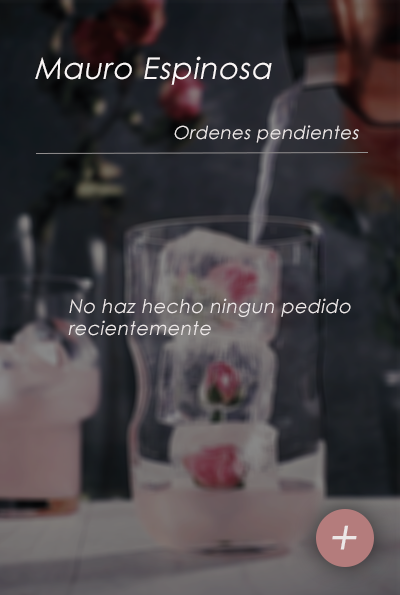
<style>
.page{position:relative;width:400px;height:595px}
.page>*{position:absolute;margin:0}
.t1{font:30px "CenturyGothic";letter-spacing:0.025em;color:#fbf7f7;font-style:italic}
.t2{font:18px "CenturyGothic";letter-spacing:0.025em;color:#ece7e7;font-style:italic}
.t3{font:19px/11px "CenturyGothic";letter-spacing:0.025em;color:#ece7e7;font-style:italic}
.t4{font:48px "CenturyGothic";letter-spacing:0.025em;color:#ece7e7;font-style:italic}
</style>
<div class="page">
<p class="t1" style="left:35px;top:56px;width:237px;height:29px">Mauro Espinosa</p>
<p class="t2" style="left:174px;top:125px;width:185px;height:18px">Ordenes pendientes</p>
<p class="t3" style="left:68px;top:298px;width:283px;height:38px;text-align:justify">No haz hecho ningun pedido <br><br>recientemente</p>
<p class="t4" style="left:332px;top:525px;width:25px;height:25px">+</p>
</div>
